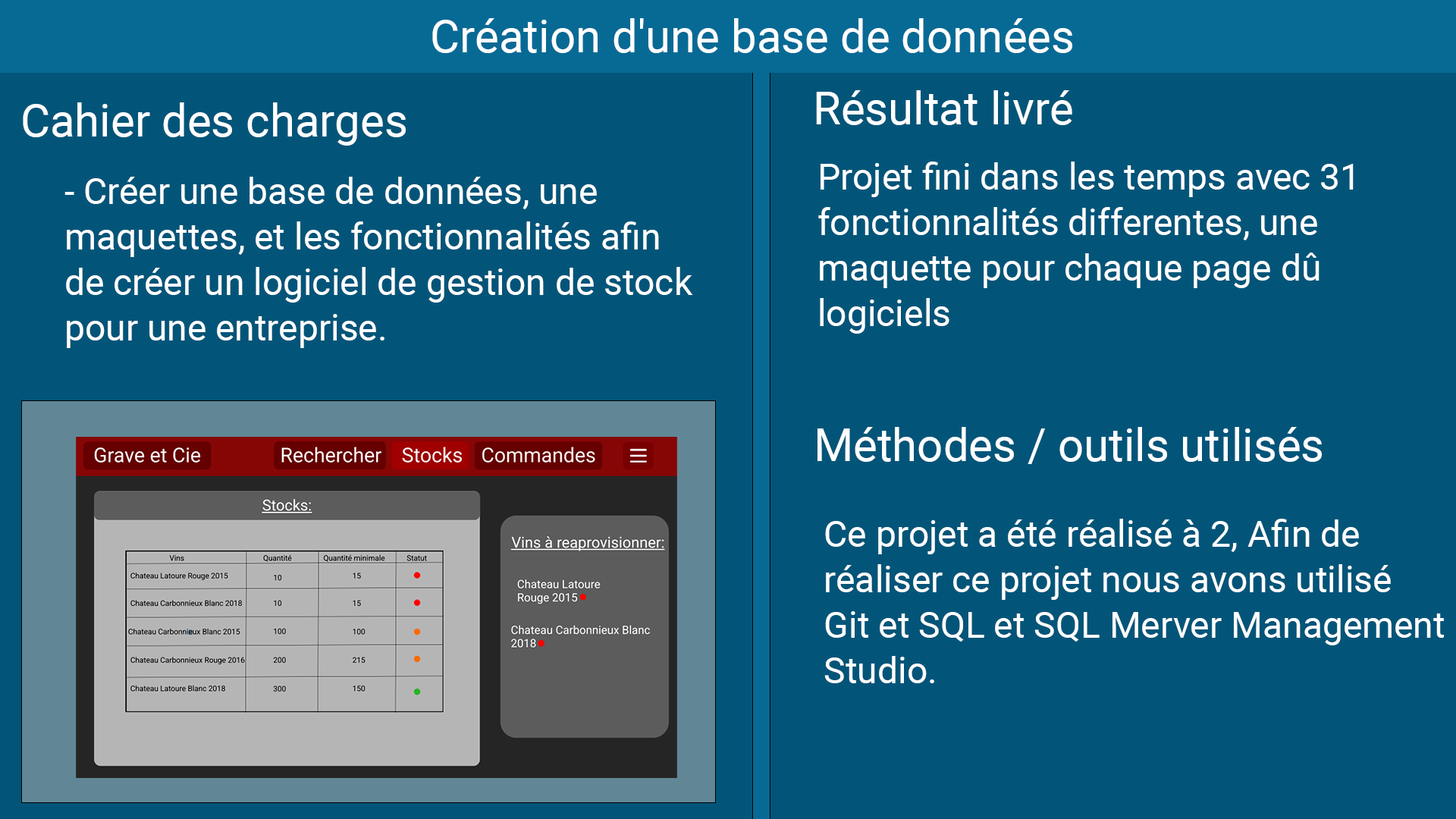
<style>
.page{position:relative;width:1456px;height:819px;background:#025579}
.page>*{position:absolute;margin:0}
.t1{font:45.5px "Roboto-Regular";color:#ffffff}
.t2{font:36.4px/45.5px "Roboto-Regular";color:#ffffff}
</style>
<div class="page">
<p class="t1" style="left:432px;top:18px;width:640px;height:35px">Création d'une base de données</p>
<p class="t1" style="left:816px;top:90px;width:256px;height:35px">Résultat livré</p>
<p class="t1" style="left:23px;top:102px;width:383px;height:44px">Cahier des charges</p>
<p class="t2" style="left:818px;top:162px;width:536px;height:172px">Projet fini dans les temps avec 31<br>fonctionnalités differentes, une <br>maquette pour chaque page dû <br>logiciels</p>
<p class="t2" style="left:64px;top:177px;width:629px;height:171px">- Créer une base de données, une <br>maquettes, et les fonctionnalités afin<br>de créer un logiciel de gestion de stock<br>pour une entreprise.</p>
<p class="t1" style="left:817px;top:427px;width:505px;height:37px">Méthodes / outils utilisés</p>
<p class="t2" style="left:824px;top:519px;width:620px;height:164px">Ce projet a été réalisé à 2, Afin de <br>réaliser ce projet nous avons utilisé<br>Git et SQL et SQL Merver Management<br>Studio.</p>
</div>
